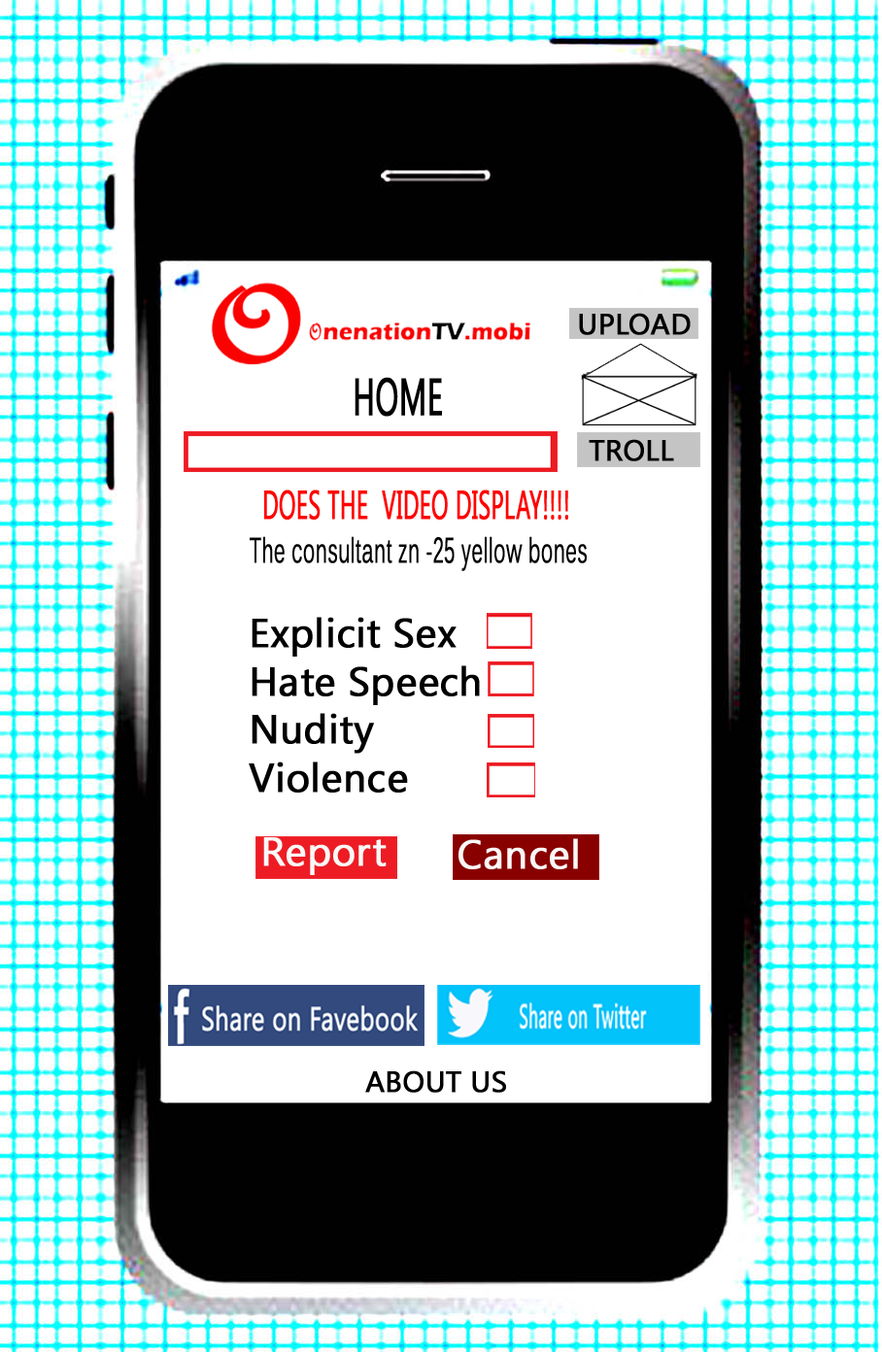
<style>
.page{position:relative;width:882px;height:1352px;background:#ffffff}
.page>*{position:absolute;margin:0}
.t1{font:29px "KhmerUI";color:#000202;font-weight:bold}
.t2{font:51.9px "KhmerUI";color:#000101;font-weight:bold;scale:0.59 1}
.t3{font:40.1px "KhmerUI";color:#ff0202;font-weight:bold;scale:0.56 1}
.t4{font:34.8px "Kalinga";color:#000101;font-weight:bold;scale:0.55 1}
.t5{font:40.1px "KhmerUI";color:#020000;font-weight:bold}
.t6{font:40.1px "KhmerUI";color:#faf8f8;font-weight:bold}
.t7{font:29px "KhmerUI";color:#000101;font-weight:bold}
</style>
<div class="page">
<p class="t1" style="left:579px;top:313px;width:112px;height:22px">UPLOAD</p>
<p class="t2" style="left:355px;top:377px;width:87px;height:40px">HOME</p>
<p class="t1" style="left:589px;top:439px;width:85px;height:22px">TROLL</p>
<p class="t3" style="left:264px;top:490px;width:304px;height:30px">DOES THE  VIDEO DISPLAY!!!!</p>
<p class="t4" style="left:250px;top:536px;width:337px;height:35px">The consultant zn -25 yellow bones</p>
<p class="t5" style="left:249px;top:617px;width:231px;height:176px">Explicit Sex<br>Hate Speech<br>Nudity<br>Violence</p>
<p class="t6" style="left:263px;top:837px;width:124px;height:38px">Report</p>
<p class="t6" style="left:458px;top:838px;width:120px;height:31px">Cancel</p>
<p class="t7" style="left:365px;top:1070px;width:141px;height:23px">ABOUT US</p>
</div>
